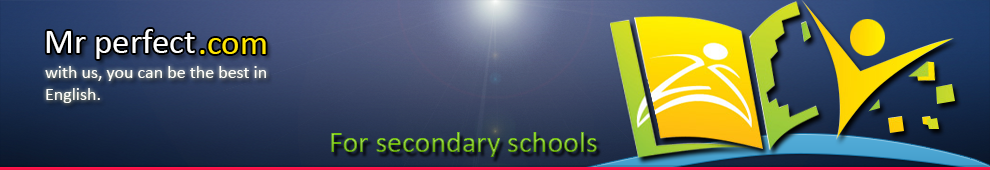
<style>
.page{position:relative;width:990px;height:170px}
.page>*{position:absolute;margin:0}
.t1{font:35px "Calibri";color:#fdfdfd}
.t2{font:35px "Calibri";color:#ffe601}
.t3{font:18px "Calibri";color:#fefefa}
.t4{font:30px "Calibri"}
</style>
<div class="page">
<p class="t1" style="left:46px;top:29px;width:149px;height:30px">Mr perfect</p>
<p class="t2" style="left:200px;top:38px;width:66px;height:16px">.com</p>
<p class="t3" style="left:45px;top:66px;width:221px;height:37px">with us, you can be the best in<br>English.</p>
<p class="t4" style="left:331px;top:132px;width:266px;height:25px">For secondary schools</p>
</div>
